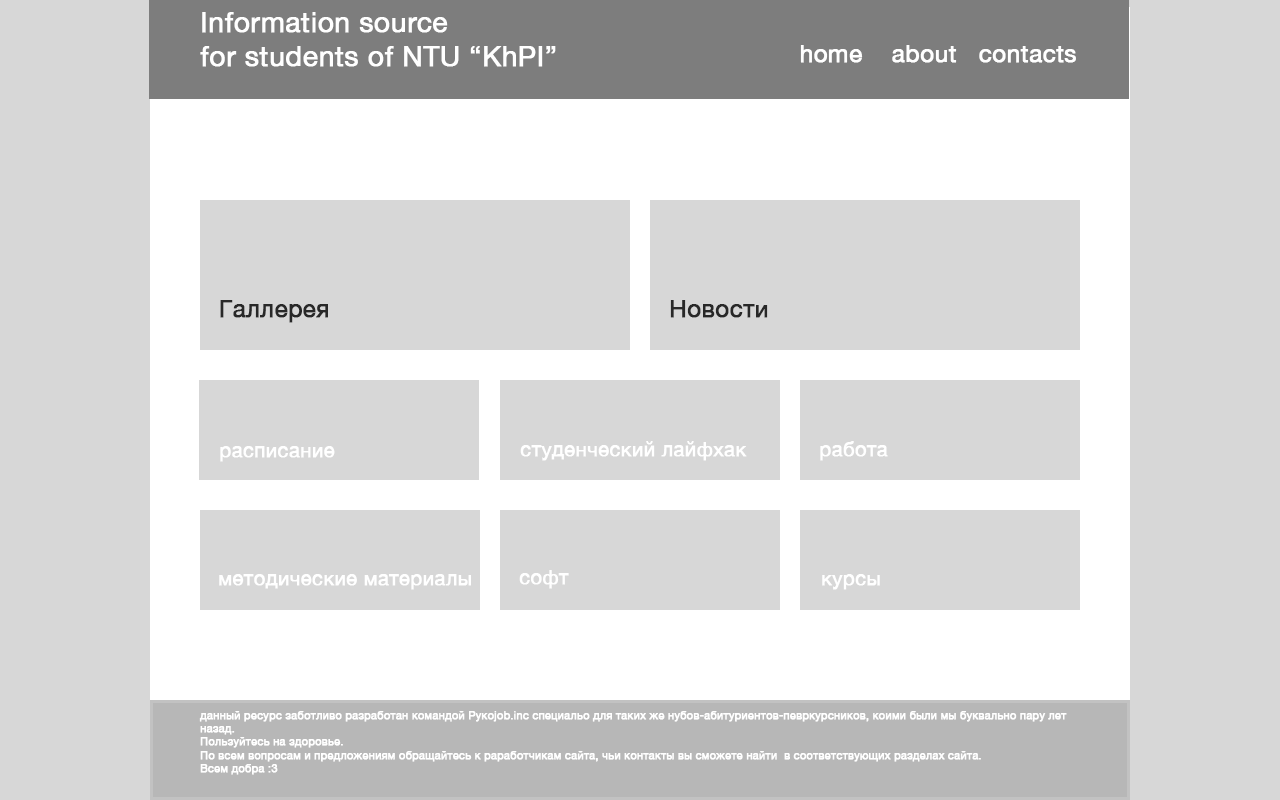
<style>
.page{position:relative;width:1280px;height:800px;background:#d7d7d7}
.page>*{position:absolute;margin:0}
.t1{font:28px "HelveticaNeue";color:#ffffff;font-weight:bold}
.t2{font:24px "HelveticaNeue";color:#ffffff;font-weight:bold}
.t3{font:24px "HelveticaNeue";color:#282828;font-weight:bold}
.t4{font:20px "HelveticaNeue";color:#ffffff;font-weight:bold}
.t5{font:11px "HelveticaNeue";color:#ffffff;font-weight:bold}
</style>
<div class="page">
<p class="t1" style="left:200px;top:12px;width:356px;height:55px">Information source <br>for students of NTU “KhPI”</p>
<p class="t2" style="left:800px;top:45px;width:276px;height:18px">home    about   contacts</p>
<p class="t3" style="left:220px;top:300px;width:108px;height:23px">Галлерея</p>
<p class="t3" style="left:670px;top:300px;width:98px;height:18px">Новости</p>
<p class="t4" style="left:220px;top:446px;width:115px;height:16px">расписание</p>
<p class="t4" style="left:520px;top:441px;width:227px;height:20px">студенческий лайфхак</p>
<p class="t4" style="left:820px;top:441px;width:68px;height:20px">работа</p>
<p class="t4" style="left:219px;top:574px;width:252px;height:16px">методические материалы</p>
<p class="t4" style="left:519px;top:570px;width:50px;height:19px">софт</p>
<p class="t4" style="left:822px;top:574px;width:58px;height:16px">курсы</p>
<p class="t5" style="left:199px;top:711px;width:868px;height:64px">данный ресурс заботливо разработан командой Рукоjob.inc специальо для таких же нубов-абитуриентов-певркурсников, коими были мы буквально пару лет назад.<br>Пользуйтесь на здоровье.<br>По всем вопросам и предложениям обращайтесь к раработчикам сайта, чьи контакты вы сможете найти  в соответствующих разделах сайта.<br>Всем добра :3</p>
</div>
